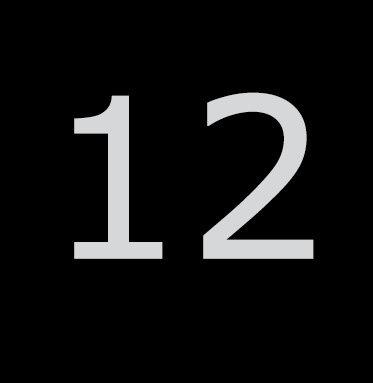
<style>
.page{position:relative;width:373px;height:383px;background:#000000}
.page>*{position:absolute;margin:0}
.t1{font:223.1px "Verdana";color:#d5d7d8}
</style>
<div class="page">
<p class="t1" style="left:74px;top:92px;width:240px;height:167px">12</p>
</div>
